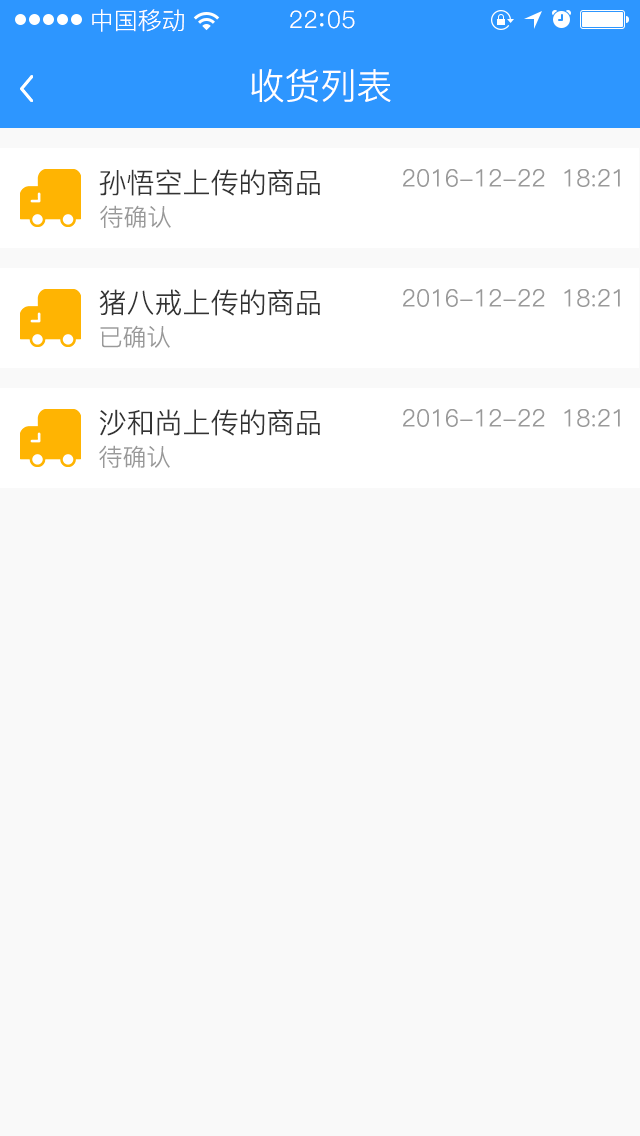
<style>
.page{position:relative;width:640px;height:1136px;background:#f9f9f9}
.page>*{position:absolute;margin:0}
.t1{font:24px "PingFang-SC-Regular";color:#ffffff}
.t2{font:24px "PingFang-SC-Regular";letter-spacing:0.03em;color:#ffffff}
.t3{font:36px "PingFang-SC-Regular";color:#ffffff}
.t4{font:28px "PingFang-SC-Regular";color:#333333}
.t5{font:24px "PingFang-SC-Regular";color:#999999}
</style>
<div class="page">
<p class="t1" style="left:92px;top:9px;width:92px;height:23px">中国移动</p>
<p class="t2" style="left:290px;top:10px;width:65px;height:19px">22 05</p>
<p class="t3" style="left:251px;top:68px;width:140px;height:35px">收货列表</p>
<p class="t4" style="left:99px;top:169px;width:221px;height:27px">孙悟空上传的商品</p>
<p class="t5" style="left:403px;top:169px;width:217px;height:18px">2016-12-22  18:21</p>
<p class="t5" style="left:100px;top:205px;width:71px;height:23px">待确认</p>
<p class="t4" style="left:99px;top:289px;width:221px;height:27px">猪八戒上传的商品</p>
<p class="t5" style="left:403px;top:289px;width:217px;height:18px">2016-12-22  18:21</p>
<p class="t5" style="left:100px;top:325px;width:70px;height:23px">已确认</p>
<p class="t4" style="left:99px;top:409px;width:221px;height:27px">沙和尚上传的商品</p>
<p class="t5" style="left:403px;top:409px;width:217px;height:18px">2016-12-22  18:21</p>
<p class="t5" style="left:99px;top:445px;width:71px;height:23px">待确认</p>
</div>
